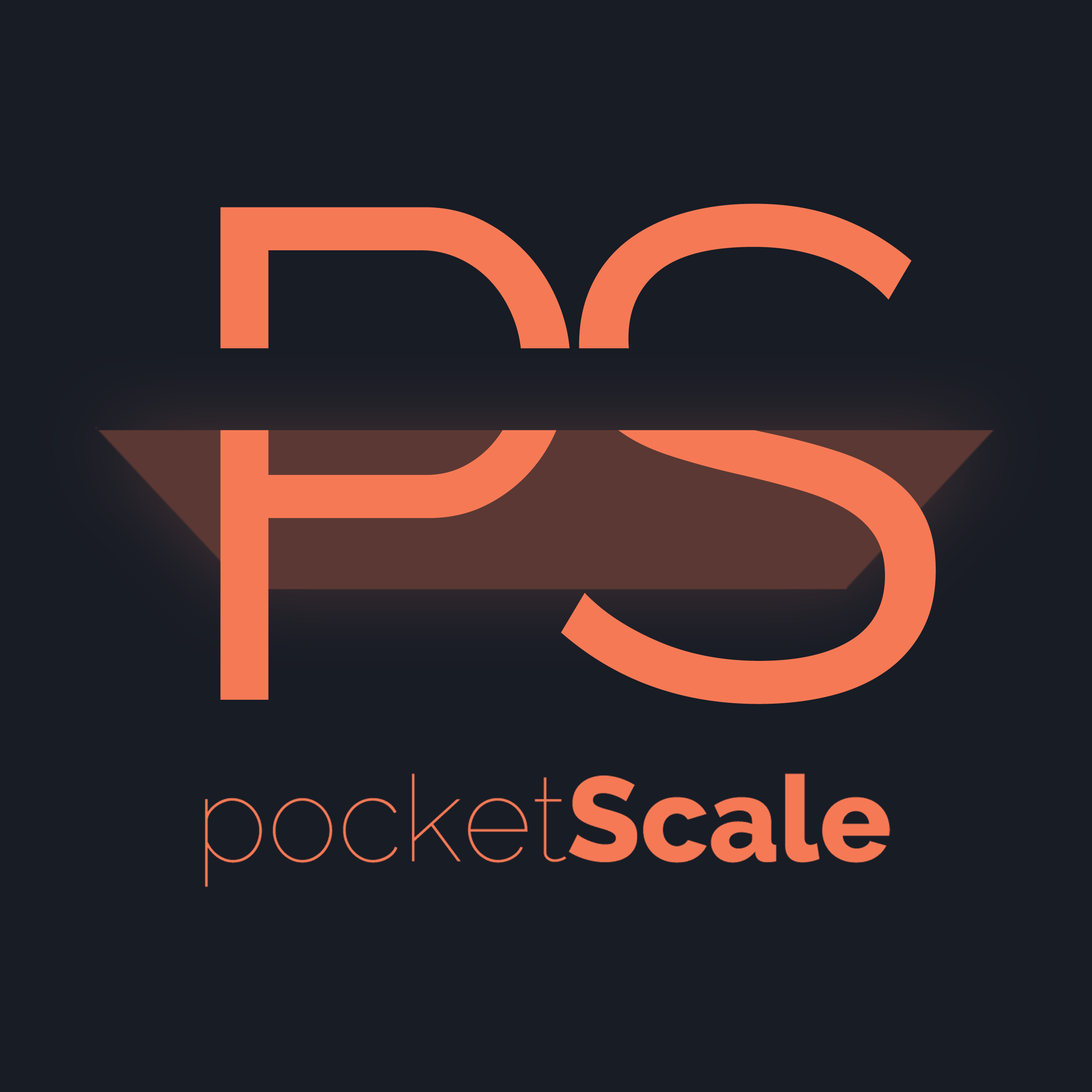
<style>
.page{position:relative;width:1092px;height:1092px;background:#181c25}
.page>*{position:absolute;margin:0}
.t1{font:119.5px "Raleway-Thin";color:#f67955}
.t2{font:119.5px "Raleway-ExtraBold";color:#f67955}
</style>
<div class="page">
<p class="t1" style="left:205px;top:773px;width:685px;height:114px">pocket<span class="t2">Scale</span></p>
</div>
